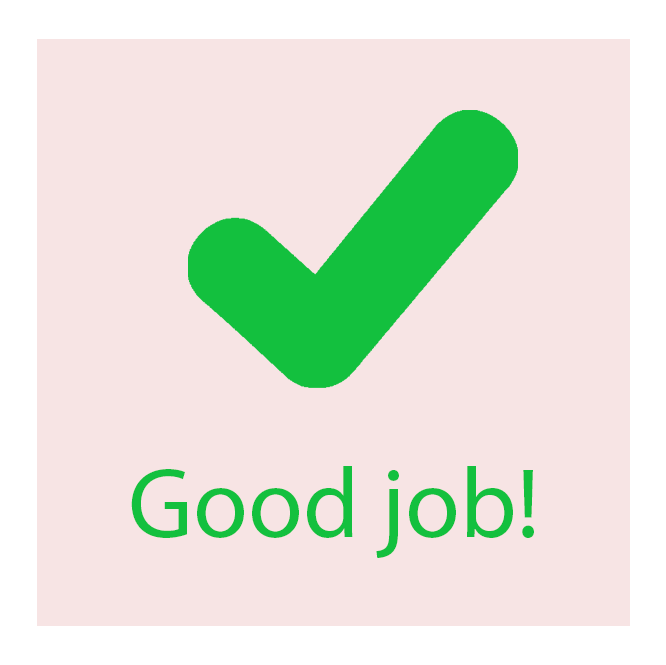
<style>
.page{position:relative;width:666px;height:665px;background:#f7e4e4}
.page>*{position:absolute;margin:0}
.t1{font:100px "MyriadPro-Regular";color:#13c03e}
</style>
<div class="page">
<p class="t1" style="left:131px;top:466px;width:403px;height:92px">Good job!</p>
</div>
